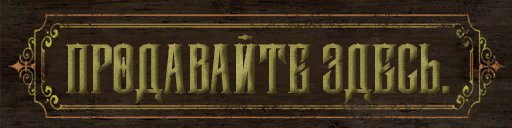
<style>
.page{position:relative;width:512px;height:128px}
.page>*{position:absolute;margin:0}
.t1{font:69.3px "mr_ReaverockG";text-transform:uppercase}
</style>
<div class="page">
<p class="t1" style="left:66px;top:34px;width:384px;height:70px">ПРОДАВАЙТЕ ЗДЕСЬ.</p>
</div>
